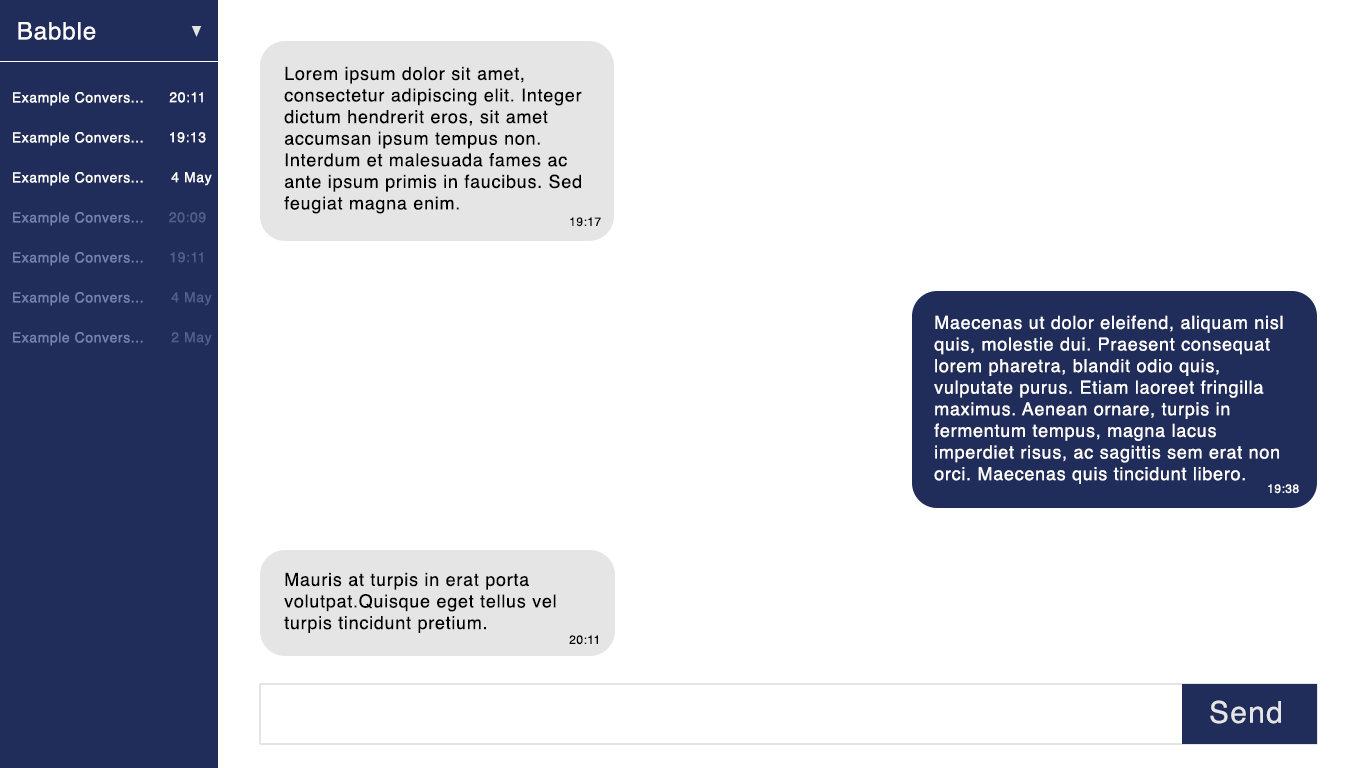
<style>
.page{position:relative;width:1366px;height:768px;background:#ffffff}
.page>*{position:absolute;margin:0}
.t1{font:24px "Helvetica";letter-spacing:0.04em;color:#ffffff}
.t2{font:18px "Helvetica";letter-spacing:0.04em;color:#000000}
.t3{font:14px "Helvetica";letter-spacing:0.04em;color:#ffffff}
.t4{font:14px "Helvetica";letter-spacing:0.04em;color:#7582ae}
.t5{font:14px "Helvetica";letter-spacing:0.04em;color:#525f8b}
.t6{font:12px "Helvetica";letter-spacing:0.04em;color:#000000}
.t7{font:18px "Helvetica";letter-spacing:0.04em;color:#ffffff}
.t8{font:12px "Helvetica";letter-spacing:0.04em;color:#ffffff}
.t9{font:30px "Helvetica";letter-spacing:0.04em;color:#e5e5e5}
</style>
<div class="page">
<p class="t1" style="left:18px;top:22px;width:78px;height:18px">Babble</p>
<p class="t2" style="left:284px;top:66px;width:298px;height:148px">Lorem ipsum dolor sit amet, <br>consectetur adipiscing elit. Integer <br>dictum hendrerit eros, sit amet <br>accumsan ipsum tempus non. <br>Interdum et malesuada fames ac <br>ante ipsum primis in faucibus. Sed <br>feugiat magna enim.</p>
<p class="t3" style="left:13px;top:92px;width:130px;height:14px">Example Convers...</p>
<p class="t3" style="left:169px;top:92px;width:34px;height:11px">20:11</p>
<p class="t3" style="left:13px;top:132px;width:130px;height:14px">Example Convers...</p>
<p class="t3" style="left:170px;top:132px;width:36px;height:11px">19:13</p>
<p class="t3" style="left:13px;top:172px;width:130px;height:14px">Example Convers...</p>
<p class="t3" style="left:171px;top:172px;width:41px;height:14px">4 May</p>
<p class="t4" style="left:13px;top:212px;width:130px;height:14px">Example Convers...</p>
<p class="t5" style="left:169px;top:212px;width:37px;height:11px">20:09</p>
<p class="t6" style="left:570px;top:217px;width:31px;height:10px">19:17</p>
<p class="t4" style="left:13px;top:252px;width:130px;height:14px">Example Convers...</p>
<p class="t5" style="left:170px;top:252px;width:33px;height:11px">19:11</p>
<p class="t4" style="left:13px;top:292px;width:130px;height:14px">Example Convers...</p>
<p class="t5" style="left:171px;top:292px;width:41px;height:14px">4 May</p>
<p class="t7" style="left:934px;top:315px;width:349px;height:169px">Maecenas ut dolor eleifend, aliquam nisl <br>quis, molestie dui. Praesent consequat <br>lorem pharetra, blandit odio quis, <br>vulputate purus. Etiam laoreet fringilla <br>maximus. Aenean ornare, turpis in <br>fermentum tempus, magna lacus <br>imperdiet risus, ac sagittis sem erat non <br>orci. Maecenas quis tincidunt libero.</p>
<p class="t4" style="left:13px;top:332px;width:130px;height:14px">Example Convers...</p>
<p class="t5" style="left:171px;top:332px;width:41px;height:14px">2 May</p>
<p class="t8" style="left:1268px;top:484px;width:31px;height:10px">19:38</p>
<p class="t2" style="left:284px;top:572px;width:272px;height:61px">Mauris at turpis in erat porta <br>volutpat.Quisque eget tellus vel <br>turpis tincidunt pretium.</p>
<p class="t6" style="left:569px;top:635px;width:29px;height:10px">20:11</p>
<p class="t9" style="left:1210px;top:700px;width:71px;height:24px">Send</p>
</div>
